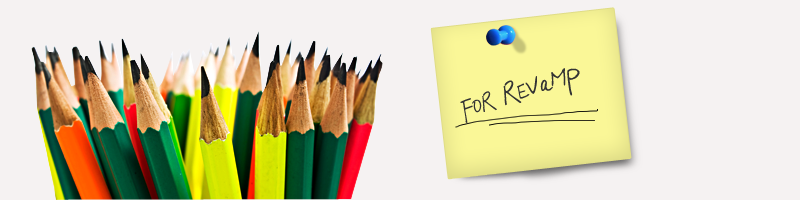
<style>
.page{position:relative;width:800px;height:200px;background:#f5f2f2}
.page>*{position:absolute;margin:0}
.t1{font:20.3px "Mumsies";letter-spacing:-0.025em;color:#333333}
.t2{font:16.2px "Mumsies";letter-spacing:-0.025em;color:#333333}
.t3{font:24.3px "Mumsies";letter-spacing:-0.025em;color:#333333}
.t4{font:22.3px "Mumsies";letter-spacing:-0.025em;color:#333333}
</style>
<div class="page">
<p class="t1" style="left:460px;top:68px;width:106px;height:55px;rotate:-18deg">F<span class="t2">O</span>R <span class="t3">R</span><span class="t2">E</span>V<span class="t3">a</span>M</p>
<p class="t4" style="left:567px;top:68px;width:13px;height:28px;rotate:-20deg">P</p>
</div>
